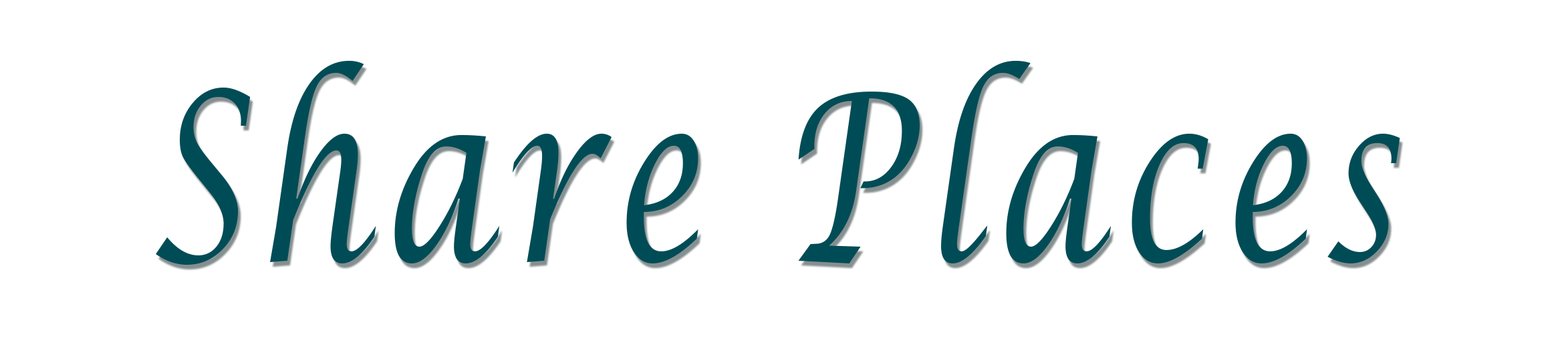
<style>
.page{position:relative;width:1568px;height:357px;background:#ffffff}
.page>*{position:absolute;margin:0}
.t1{font:233.9px "LucidaCalligraphy-Italic";letter-spacing:0.075em;color:#004c56;scale:0.71 1}
</style>
<div class="page">
<p class="t1" style="left:156px;top:61px;width:1244px;height:204px">Share Places</p>
</div>
